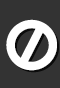
<style>
.page{position:relative;width:60px;height:88px;background:#333333}
.page>*{position:absolute;margin:0}
.t1{font:80px "EarthOrbiterExtra-Bold";color:#ffffff}
</style>
<div class="page">
<p class="t1" style="left:6px;top:19px;width:51px;height:52px">0</p>
</div>
